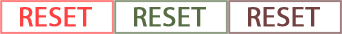
<style>
.page{position:relative;width:342px;height:34px;background:#ffffff}
.page>*{position:absolute;margin:0}
.t1{font:27.8px "MyriadPro-Regular";color:#ff4040;font-weight:bold}
.t2{font:27.8px "MyriadPro-Regular";color:#566d44;font-weight:bold}
.t3{font:27.8px "MyriadPro-Regular";color:#734040;font-weight:bold}
</style>
<div class="page">
<p class="t1" style="left:20px;top:7px;width:72px;height:20px">RESET</p>
<p class="t2" style="left:134px;top:7px;width:72px;height:20px">RESET</p>
<p class="t3" style="left:248px;top:7px;width:72px;height:20px">RESET</p>
</div>
